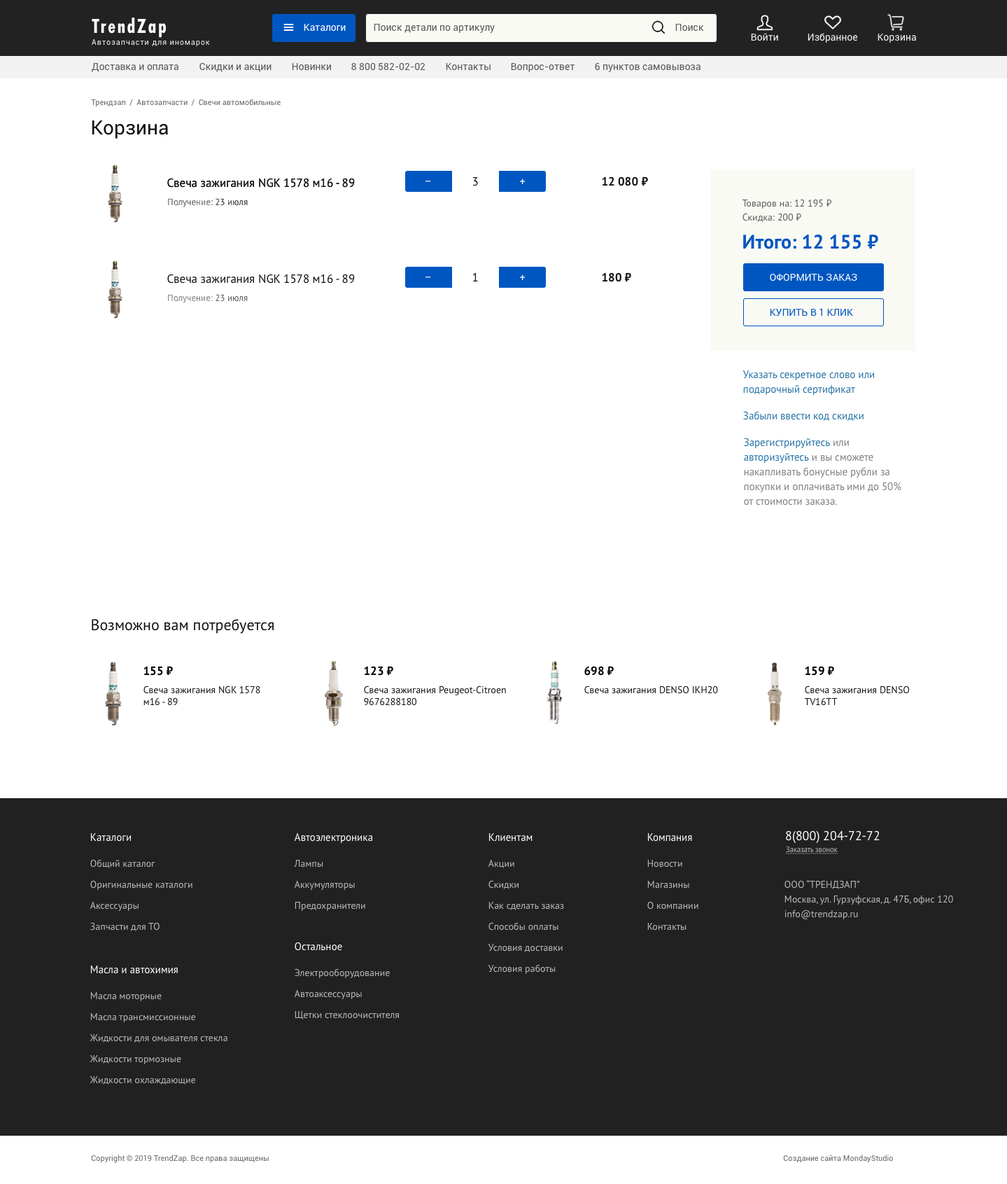
<style>
.page{position:relative;width:1007px;height:1184px;background:#ffffff}
.page>*{position:absolute;margin:0}
.t1{font:21px "FuturaNewCondBold-Reg";letter-spacing:0.075em;color:#ffffff}
.t2{font:9.8px "Roboto-Regular";color:#ffffff}
.t3{font:9.8px "Roboto-Regular";color:#595959}
.t4{font:7.7px "Roboto-Regular";letter-spacing:0.075em;color:#f2f2f2}
.t5{font:9.8px "Roboto-Regular";color:#f2f2f2}
.t6{font:7.7px "Roboto-Regular";color:#6a6465}
.t7{font:19.6px "Roboto-Regular";color:#121214}
.t8{font:11.9px "PTSans-Regular";color:#121214}
.t9{font:9.8px "Roboto-Regular";text-transform:uppercase}
.t10{font:11.9px "PTSans-Regular";color:#121214;text-transform:uppercase}
.t11{font:9.8px "Roboto-Regular";color:#ffffff;text-transform:uppercase}
.t12{font:11.9px "PTSans-Bold";color:#121214}
.t13{font:9.1px "PTSans-Regular";color:#808080}
.t14{font:9.1px "PTSans-Regular";color:#595959}
.t15{font:9.8px/14px "PTSans-Regular";color:#595959}
.t16{font:19.6px "PTSans-Bold";color:#0056c0}
.t17{font:9.8px "Roboto-Regular";color:#0056c0;text-transform:uppercase}
.t18{font:10.5px/14.7px "PTSans-Regular";color:#2673a5}
.t19{font:10.5px "PTSans-Regular";color:#2673a5}
.t20{font:10.5px/14.7px "PTSans-Regular";color:#808080}
.t21{font:15.4px "PTSans-Regular";color:#121214}
.t22{font:11.9px "PTSans-Bold";color:#000000}
.t23{font:9.8px/11.9px "PTSans-Regular";color:#121214}
.t24{font:9.8px "PTSans-Regular";color:#121214}
.t25{font:10.5px "PTSans-Regular";color:#ffffff}
.t26{font:12.6px "PTSans-Regular";color:#ffffff}
.t27{font:7.7px "PTSans-Regular";letter-spacing:-0.025em;color:#bbbbbb;text-decoration:underline}
.t28{font:9.8px/21px "PTSans-Regular";color:#bbbbbb}
.t29{font:9.8px/14.7px "PTSans-Regular";color:#bbbbbb}
.t30{font:9.8px/14.7px "PTSans-Regular";color:#bbbbbb;text-transform:uppercase}
</style>
<div class="page">
<p class="t1" style="left:92px;top:18px;width:75px;height:20px">TrendZap</p>
<p class="t2" style="left:304px;top:24px;width:42px;height:8px">Каталоги</p>
<p class="t3" style="left:374px;top:24px;width:121px;height:9px">Поиск детали по артикулу</p>
<p class="t3" style="left:676px;top:24px;width:28px;height:8px">Поиск</p>
<p class="t4" style="left:92px;top:39px;width:118px;height:8px">Автозапчасти для иномарок</p>
<p class="t5" style="left:751px;top:33px;width:27px;height:8px">Войти</p>
<p class="t5" style="left:808px;top:33px;width:50px;height:10px">Избранное</p>
<p class="t5" style="left:878px;top:34px;width:38px;height:9px">Корзина</p>
<p class="t3" style="left:92px;top:63px;width:87px;height:9px">Доставка и оплата</p>
<p class="t3" style="left:200px;top:62px;width:72px;height:10px">Скидки и акции</p>
<p class="t3" style="left:292px;top:63px;width:39px;height:8px">Новинки</p>
<p class="t3" style="left:351px;top:62px;width:75px;height:9px">8 800 582-02-02</p>
<p class="t3" style="left:446px;top:63px;width:45px;height:8px">Контакты</p>
<p class="t3" style="left:511px;top:63px;width:64px;height:9px">Вопрос-ответ</p>
<p class="t3" style="left:595px;top:62px;width:106px;height:10px">6 пунктов самовывоза</p>
<p class="t6" style="left:91px;top:99px;width:190px;height:8px">Трендзап  /  Автозапчасти  /  Свечи автомобильные</p>
<p class="t7" style="left:92px;top:120px;width:76px;height:19px">Корзина</p>
<p class="t8" style="left:167px;top:178px;width:188px;height:10px">Свеча зажигания NGK 1578 м16 - 89</p>
<p class="t8" style="left:167px;top:178px;width:188px;height:10px">Свеча зажигания NGK 1578 м16 - 89</p>
<p class="t9" style="left:425px;top:181px;width:6px;height:1px">–</p>
<p class="t10" style="left:473px;top:177px;width:5px;height:9px">3</p>
<p class="t11" style="left:520px;top:179px;width:5px;height:5px">+</p>
<p class="t12" style="left:602px;top:176px;width:46px;height:10px">12 080 ₽</p>
<p class="t13" style="left:168px;top:198px;width:80px;height:9px">Получение: <span class="t14">23 июля</span></p>
<p class="t13" style="left:168px;top:198px;width:80px;height:9px">Получение: <span class="t14">23 июля</span></p>
<p class="t15" style="left:742px;top:199px;width:90px;height:23px">Товаров на: 12 195 ₽<br>Скидка: 200 ₽</p>
<p class="t16" style="left:743px;top:235px;width:136px;height:14px">Итого: 12 155 ₽</p>
<p class="t8" style="left:167px;top:274px;width:188px;height:10px">Свеча зажигания NGK 1578 м16 - 89</p>
<p class="t9" style="left:425px;top:277px;width:6px;height:1px">–</p>
<p class="t10" style="left:473px;top:272px;width:5px;height:9px">1</p>
<p class="t11" style="left:520px;top:274px;width:5px;height:6px">+</p>
<p class="t12" style="left:602px;top:272px;width:29px;height:10px">180 ₽</p>
<p class="t11" style="left:770px;top:273px;width:88px;height:8px">Оформить заказ</p>
<p class="t13" style="left:168px;top:294px;width:80px;height:9px">Получение: <span class="t14">23 июля</span></p>
<p class="t17" style="left:770px;top:308px;width:83px;height:8px">купить в 1 клик</p>
<p class="t18" style="left:743px;top:370px;width:131px;height:25px">Указать секретное слово или <br>подарочный сертификат</p>
<p class="t19" style="left:743px;top:411px;width:121px;height:10px">Забыли ввести код скидки</p>
<p class="t20" style="left:744px;top:438px;width:158px;height:67px"><span class="t18">Зарегистрируйтесь</span> или <span class="t18">авторизуйтесь</span> и вы сможете накапливать бонусные рубли за покупки и оплачивать ими до 50% от стоимости заказа.</p>
<p class="t21" style="left:92px;top:619px;width:182px;height:15px">Возможно вам потребуется</p>
<p class="t22" style="left:144px;top:666px;width:29px;height:10px">155 ₽</p>
<p class="t22" style="left:364px;top:666px;width:29px;height:10px">123 ₽</p>
<p class="t22" style="left:585px;top:666px;width:29px;height:10px">698 ₽</p>
<p class="t22" style="left:805px;top:666px;width:29px;height:10px">159 ₽</p>
<p class="t23" style="left:144px;top:685px;width:116px;height:21px">Свеча зажигания NGK 1578<br>м16 - 89</p>
<p class="t23" style="left:364px;top:685px;width:142px;height:21px">Свеча зажигания Peugeot-Citroen 9676288180</p>
<p class="t24" style="left:585px;top:685px;width:133px;height:9px">Свеча зажигания DENSO IKH20</p>
<p class="t23" style="left:804px;top:685px;width:106px;height:21px">Свеча зажигания DENSO <br>TV16TT</p>
<p class="t25" style="left:90px;top:833px;width:41px;height:8px">Каталоги</p>
<p class="t25" style="left:294px;top:832px;width:78px;height:11px">Автоэлектроника</p>
<p class="t25" style="left:489px;top:833px;width:44px;height:8px">Клиентам</p>
<p class="t25" style="left:648px;top:833px;width:44px;height:8px">Компания</p>
<p class="t26" style="left:786px;top:830px;width:94px;height:13px">8(800) 204-72-72</p>
<p class="t27" style="left:785px;top:846px;width:53px;height:8px">Заказать звонок</p>
<p class="t28" style="left:90px;top:859px;width:103px;height:72px">Общий каталог<br>Оригинальные каталоги<br>Аксессуары<br>Запчасти для ТО</p>
<p class="t28" style="left:294px;top:860px;width:71px;height:51px">Лампы<br>Аккумуляторы<br>Предохранители</p>
<p class="t28" style="left:488px;top:859px;width:76px;height:115px">Акции<br>Скидки<br>Как сделать заказ<br>Способы оплаты<br>Условия доставки<br>Условия работы</p>
<p class="t28" style="left:648px;top:860px;width:51px;height:70px">Новости<br>Магазины<br>О компании<br>Контакты</p>
<p class="t29" style="left:785px;top:880px;width:168px;height:39px">ООО “<span class="t30">Трендзап</span>”<br>Москва, ул. Гурзуфская, д. 47Б, офис 120<br>info@trendzap.ru</p>
<p class="t25" style="left:295px;top:942px;width:47px;height:9px">Остальное</p>
<p class="t25" style="left:90px;top:965px;width:88px;height:9px">Масла и автохимия</p>
<p class="t28" style="left:294px;top:968px;width:105px;height:51px">Электрооборудование<br>Автоаксессуары<br>Щетки стеклоочистителя</p>
<p class="t28" style="left:90px;top:992px;width:138px;height:92px">Масла моторные<br>Масла трансмиссионные<br>Жидкости для омывателя стекла<br>Жидкости тормозные<br>Жидкости охлаждающие</p>
<p class="t6" style="left:91px;top:1154px;width:178px;height:9px">Copyright © 2019 TrendZap. Все права защищены</p>
<p class="t6" style="left:783px;top:1154px;width:110px;height:9px">Создание сайта MondayStudio</p>
</div>
